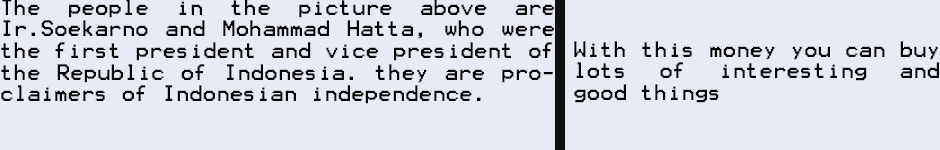
<style>
.page{position:relative;width:940px;height:150px;background:#e8ebf4}
.page>*{position:absolute;margin:0}
.t1{font:18px "Terminal";color:#060606}
</style>
<div class="page">
<p class="t1" style="left:1px;top:0px;width:553px;height:104px;text-align:justify">The people in the picture above are Ir.Soekarno and Mohammad Hatta, who were the first president and vice president of the Republic of Indonesia. they are proclaimers of Indonesian independence.</p>
<p class="t1" style="left:574px;top:41px;width:365px;height:62px;text-align:justify">With this money you can buy lots of interesting and good things</p>
</div>
